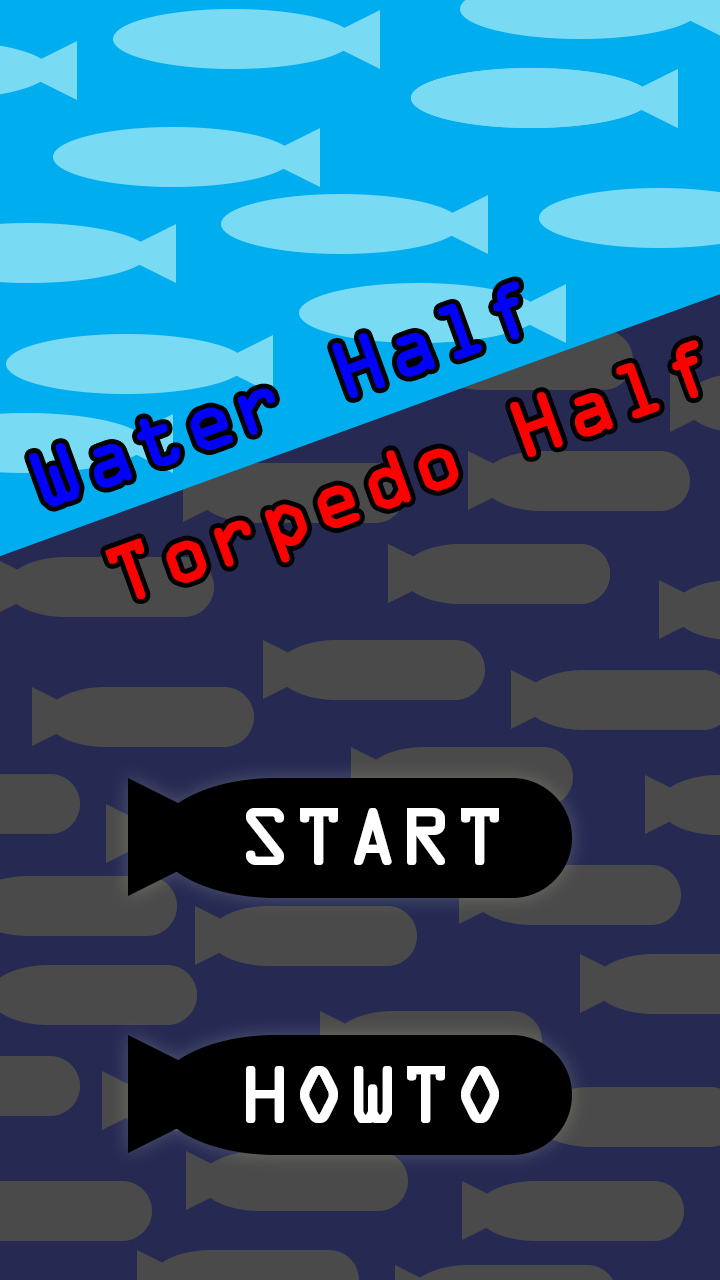
<style>
.page{position:relative;width:720px;height:1280px;background:#262a53}
.page>*{position:absolute;margin:0}
.t1{font:72px "OCRAStd";color:#0000ff;font-weight:bold}
.t2{font:72px "OCRAStd";color:#ff0000;font-weight:bold}
.t3{font:72px "OCRAStd";color:#ffffff;font-weight:bold}
</style>
<div class="page">
<p class="t1" style="left:29px;top:281px;width:490px;height:226px;rotate:-20deg">Water Half</p>
<p class="t2" style="left:105px;top:340px;width:593px;height:259px;rotate:-20deg">Torpedo Half</p>
<p class="t3" style="left:246px;top:808px;width:253px;height:57px">START</p>
<p class="t3" style="left:246px;top:1066px;width:253px;height:57px">HOWTO</p>
</div>
